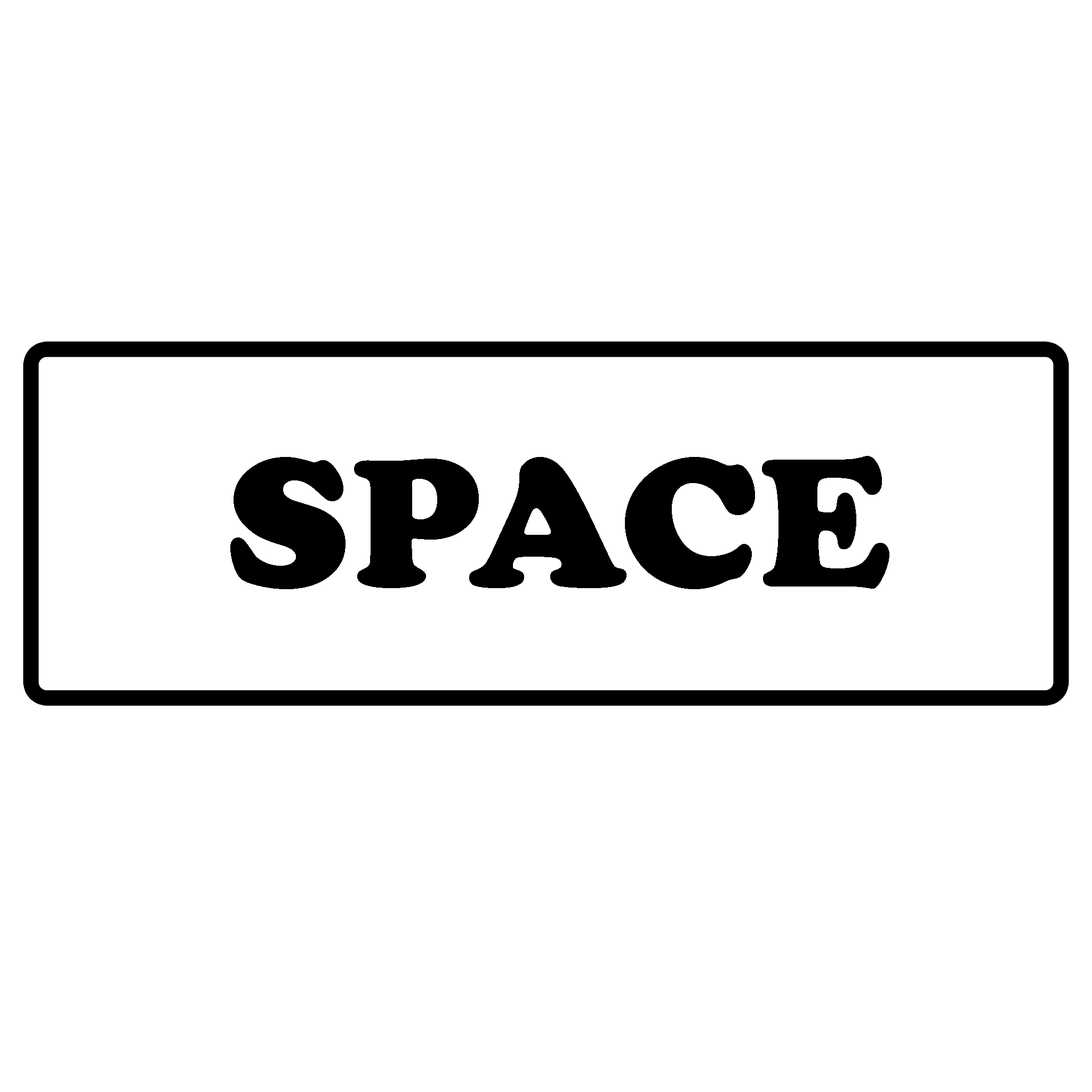
<style>
.page{position:relative;width:1092px;height:1092px;background:#ffffff}
.page>*{position:absolute;margin:0}
.t1{font:190.4px "CooperBlack";letter-spacing:0.01em;color:#000000}
</style>
<div class="page">
<p class="t1" style="left:230px;top:456px;width:659px;height:133px">SPACE</p>
</div>
